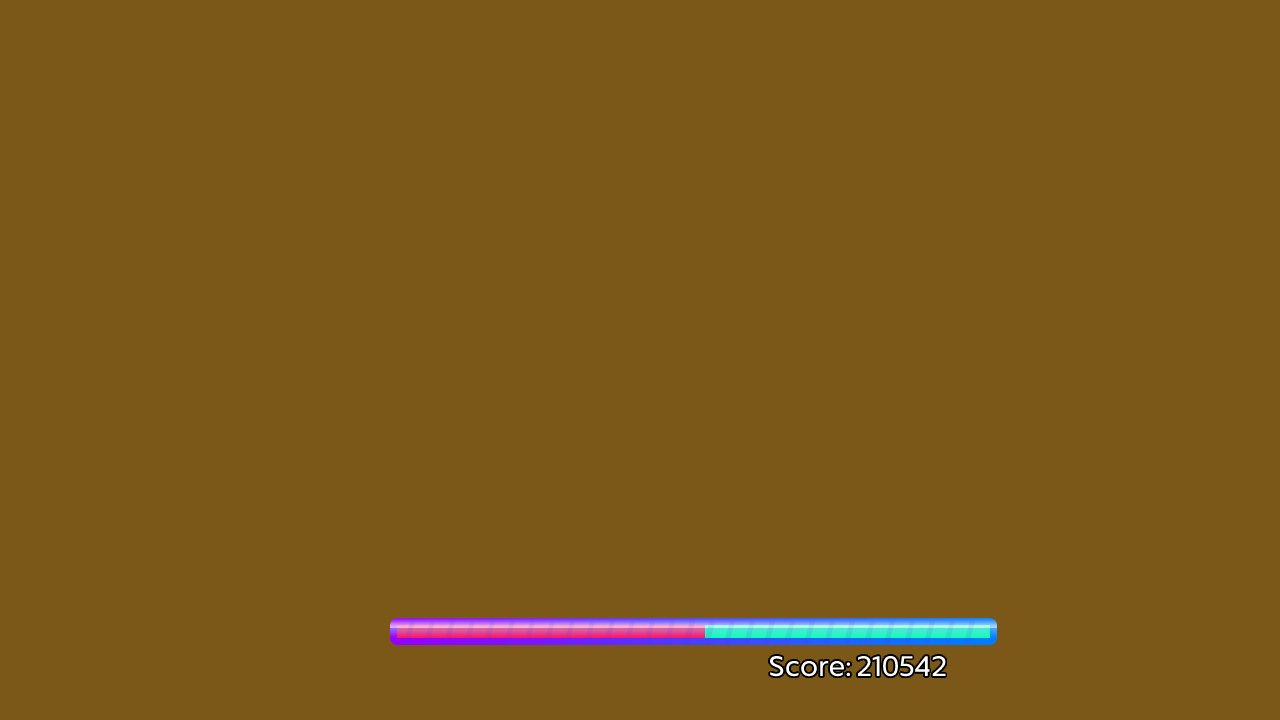
<style>
.page{position:relative;width:1280px;height:720px;background:#7c5818}
.page>*{position:absolute;margin:0}
.t1{font:27.1px "CapturaNow-Regular";color:#ffffff}
</style>
<div class="page">
<p class="t1" style="left:770px;top:656px;width:176px;height:21px">Score: 210542</p>
</div>
